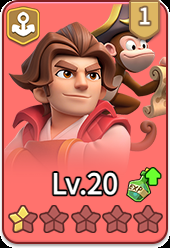
<style>
.page{position:relative;width:170px;height:248px;background:#ff726d}
.page>*{position:absolute;margin:0}
.t1{font:22px "WebPSD-18463539-0-Regular";color:#ffffff;font-weight:bold}
.t2{font:28px "WebPSD-18463539-0-Regular";color:#ffffff;font-weight:bold}
</style>
<div class="page">
<p class="t1" style="left:127px;top:0px;width:35px;height:32px">1</p>
<p class="t2" style="left:10px;top:168px;width:110px;height:32px">Lv.20</p>
</div>
